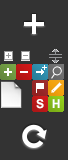
<style>
.page{position:relative;width:68px;height:160px;background:#333333}
.page>*{position:absolute;margin:0}
.t1{font:12px "Arial-BoldMT";letter-spacing:0.08em;color:#ffffff}
</style>
<div class="page">
<p class="t1" style="left:36px;top:99px;width:8px;height:10px">S</p>
<p class="t1" style="left:52px;top:99px;width:8px;height:9px">H</p>
</div>
